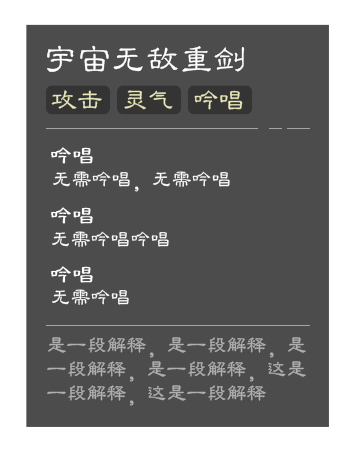
<style>
.page{position:relative;width:358px;height:456px;background:#4c4c4c}
.page>*{position:absolute;margin:0}
.t1{font:34px "FZLBJW--GB1-0";color:#ffffff}
.t2{font:25.9px "FZLBJW--GB1-0";color:#e9e7b8}
.t3{font:20px "FZLBJW--GB1-0";color:#ffffff}
.t4{font:20px/24px "FZLBJW--GB1-0";color:#b0b0b0}
</style>
<div class="page">
<p class="t1" style="left:47px;top:45px;width:198px;height:27px">宇宙无敌重剑</p>
<p class="t2" style="left:51px;top:90px;width:51px;height:19px">攻击</p>
<p class="t2" style="left:124px;top:90px;width:49px;height:20px">灵气</p>
<p class="t2" style="left:194px;top:90px;width:49px;height:20px">吟唱</p>
<p class="t3" style="left:53px;top:171px;width:177px;height:21px">无需吟唱，无需吟唱</p>
<p class="t3" style="left:52px;top:231px;width:117px;height:16px">无需吟唱吟唱</p>
<p class="t3" style="left:52px;top:289px;width:77px;height:16px">无需吟唱</p>
<p class="t4" style="left:47px;top:337px;width:259px;height:69px;text-align:right">是一段解释，是一段解释，是一段解释，是一段解释，这是一段解释，这是一段解释</p>
</div>
